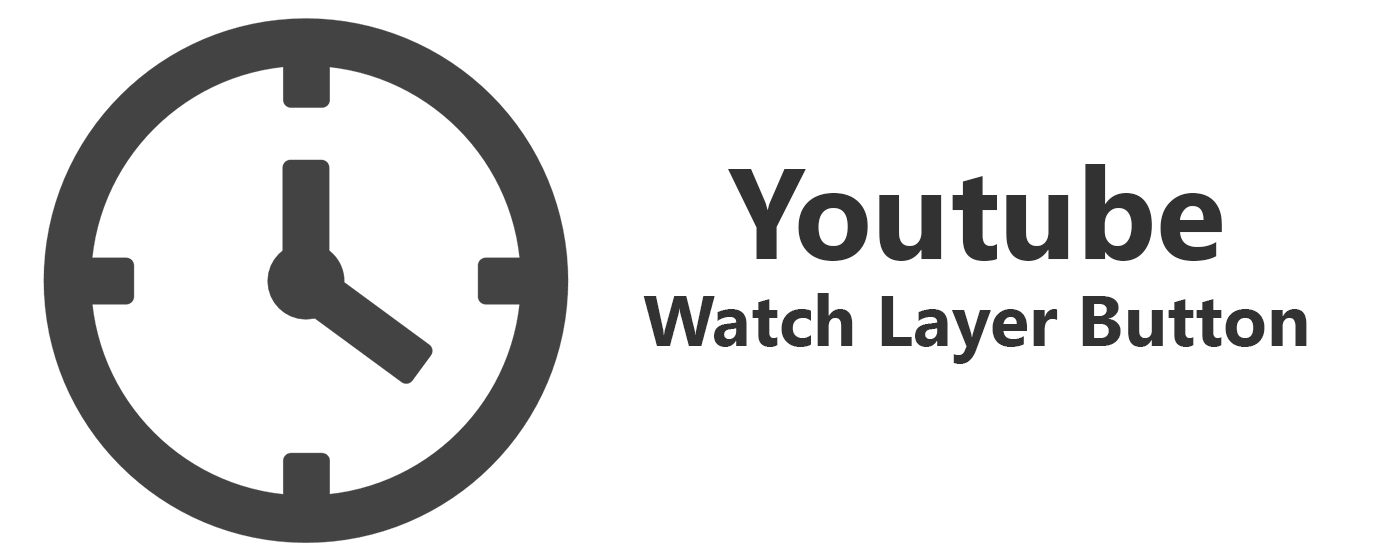
<style>
.page{position:relative;width:1400px;height:560px;background:#ffffff}
.page>*{position:absolute;margin:0}
.t1{font:72px "SegoeUI-Bold";color:#323232}
.t2{font:128px "SegoeUI-Bold";color:#323232}
</style>
<div class="page">
<p class="t1" style="left:643px;top:164px;width:664px;height:200px;text-align:center"><span class="t2">Youtube<br></span>Watch Layer Button</p>
</div>
